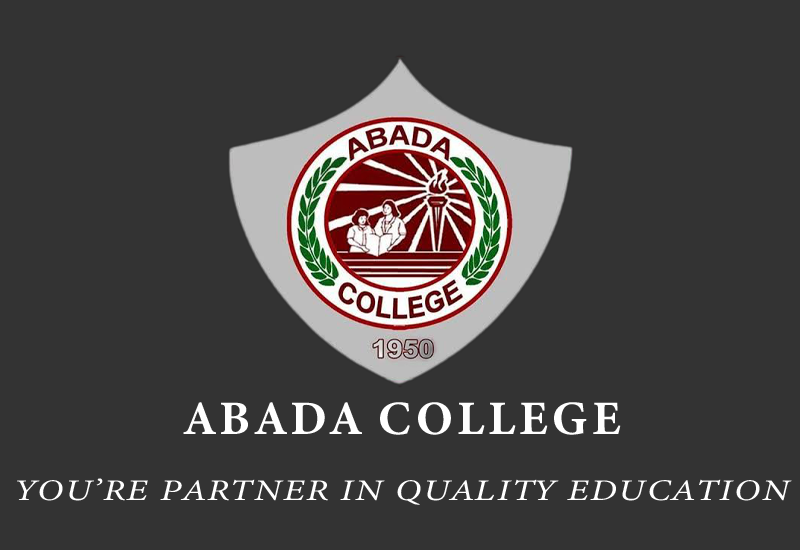
<style>
.page{position:relative;width:800px;height:550px;background:#333333}
.page>*{position:absolute;margin:0}
.t1{font:48px "MinionConceptRoman-Bold";letter-spacing:0.075em;color:#ffffff}
.t2{font:30px "MinionVariableConcept-Italic";letter-spacing:0.05em;color:#ffffff;scale:1.25 1}
</style>
<div class="page">
<p class="t1" style="left:183px;top:402px;width:438px;height:33px">ABADA COLLEGE</p>
<p class="t2" style="left:17px;top:478px;width:775px;height:27px">YOU’RE PARTNER IN QUALITY EDUCATION</p>
</div>
